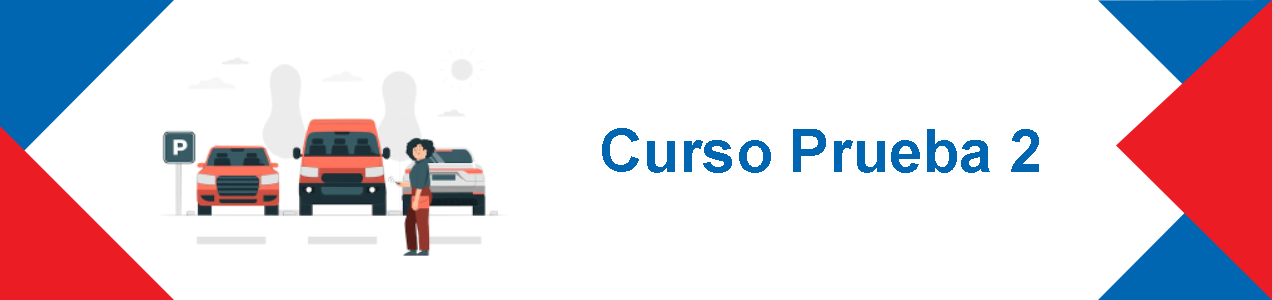
<style>
.page{position:relative;width:1272px;height:300px;background:#ffffff}
.page>*{position:absolute;margin:0}
.t1{font:60px "Arial-BoldMT";color:#0066b2}
</style>
<div class="page">
<p class="t1" style="left:602px;top:128px;width:437px;height:45px">Curso Prueba 2</p>
</div>
